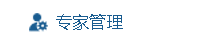
<style>
.page{position:relative;width:210px;height:35px;background:#ffffff}
.page>*{position:absolute;margin:0}
.t1{font:16.7px "MicrosoftYaHei";color:#195c90}
</style>
<div class="page">
<p class="t1" style="left:56px;top:14px;width:67px;height:16px">专家管理</p>
</div>
